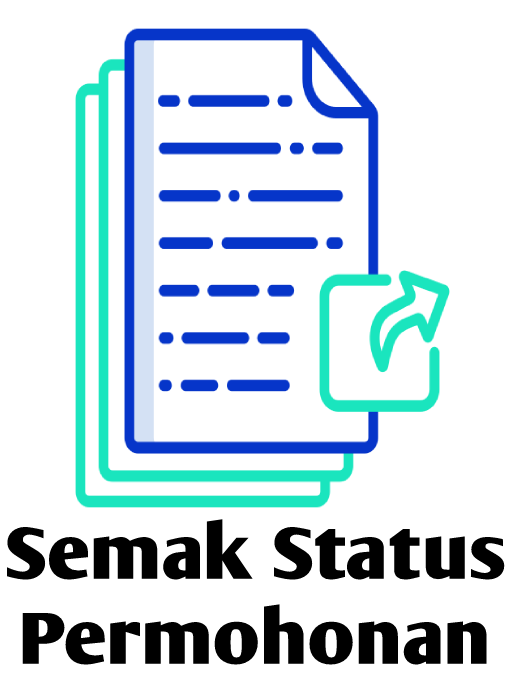
<style>
.page{position:relative;width:512px;height:700px;background:#ffffff}
.page>*{position:absolute;margin:0}
.t1{font:71.3px "ArmWrestler-Bold";color:#000000;scale:1.12 1}
</style>
<div class="page">
<p class="t1" style="left:7px;top:519px;width:498px;height:146px;text-align:center">Semak Status<br>Permohonan</p>
</div>
